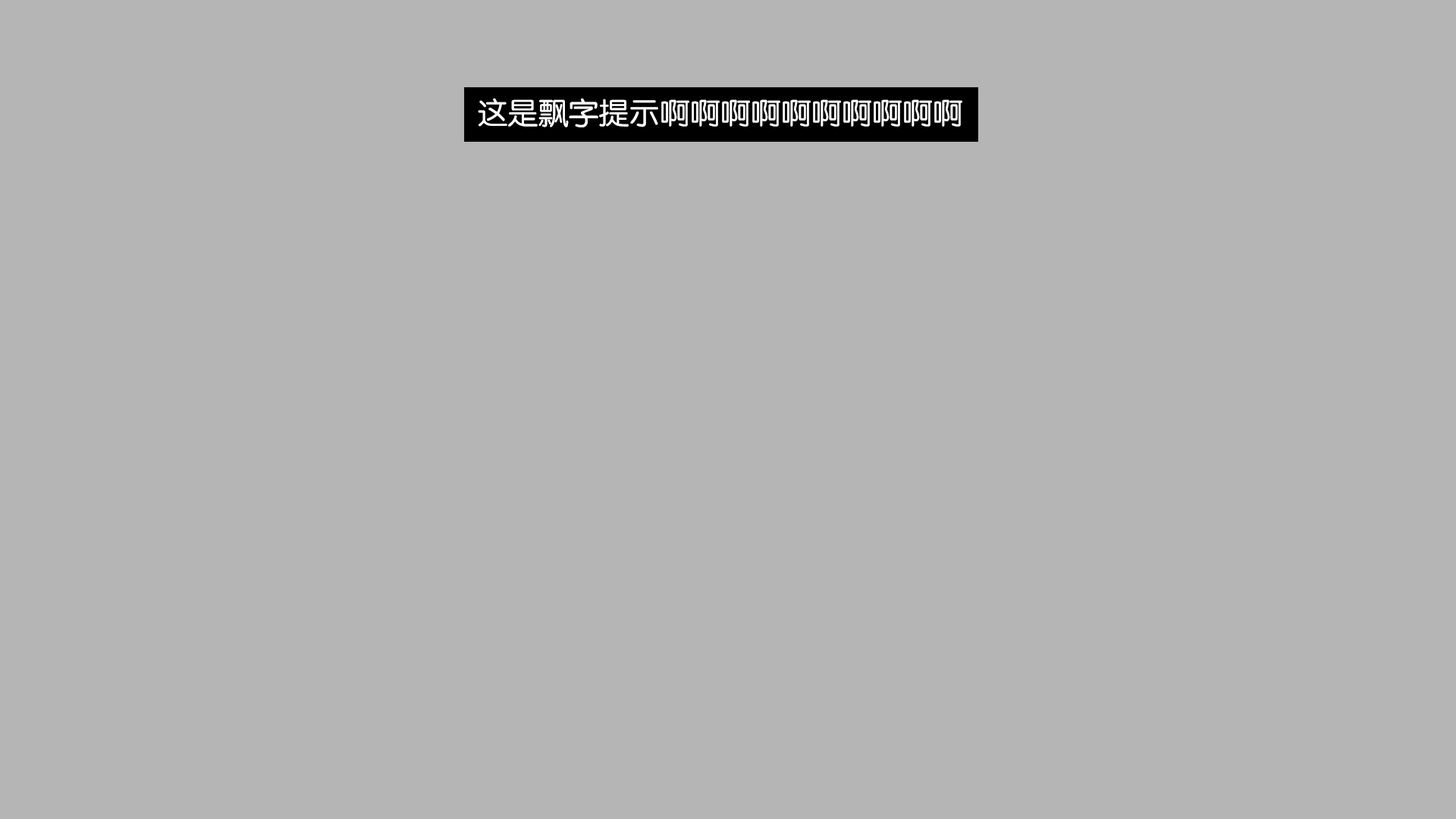
<style>
.page{position:relative;width:1456px;height:819px;background:#b5b5b5}
.page>*{position:absolute;margin:0}
.t1{font:30.3px "FZY3K--GBK1-0";color:#ffffff}
</style>
<div class="page">
<p class="t1" style="left:478px;top:98px;width:484px;height:29px">这是飘字提示啊啊啊啊啊啊啊啊啊啊</p>
</div>
